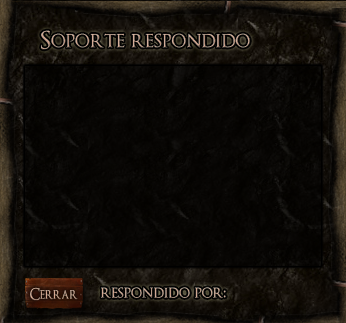
<style>
.page{position:relative;width:346px;height:323px}
.page>*{position:absolute;margin:0}
.t1{font:24px "OptimusPrinceps"}
.t2{font:15.7px "OptimusPrinceps";color:#d8a68e;scale:0.88 1}
.t3{font:18px "OptimusPrinceps";color:#d2a790}
</style>
<div class="page">
<p class="t1" style="left:41px;top:30px;width:209px;height:20px">Soporte respondido</p>
<p class="t2" style="left:30px;top:287px;width:48px;height:14px">Cerrar</p>
<p class="t3" style="left:101px;top:287px;width:125px;height:12px">respondido por:</p>
</div>
